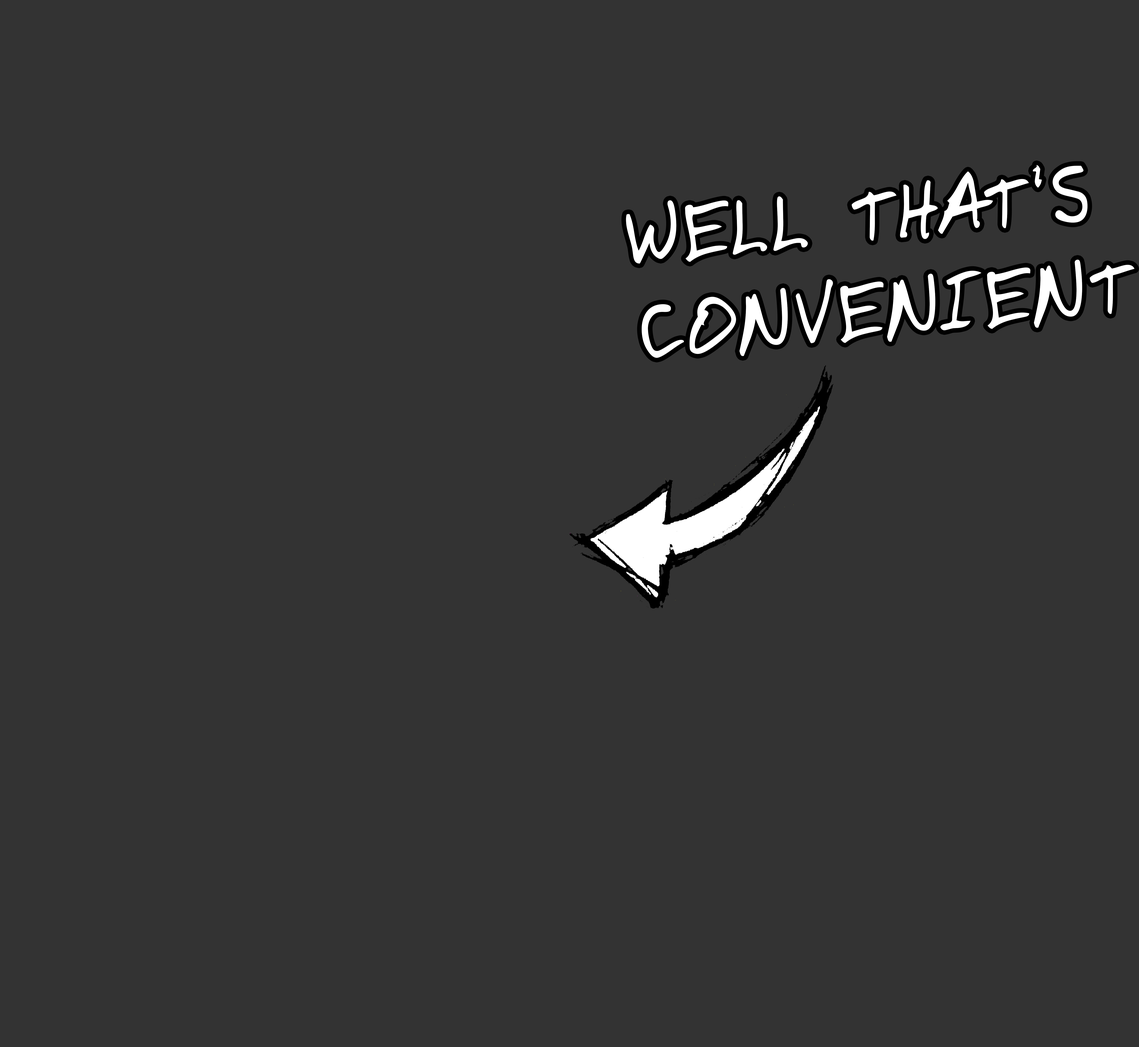
<style>
.page{position:relative;width:1139px;height:1047px;background:#333333}
.page>*{position:absolute;margin:0}
.t1{font:79.6px "DomesticManners";letter-spacing:0.04em;color:#ffffff}
</style>
<div class="page">
<p class="t1" style="left:626px;top:165px;width:508px;height:193px;rotate:-5deg">WELL THAT'S<br>CONVENIENT</p>
</div>
